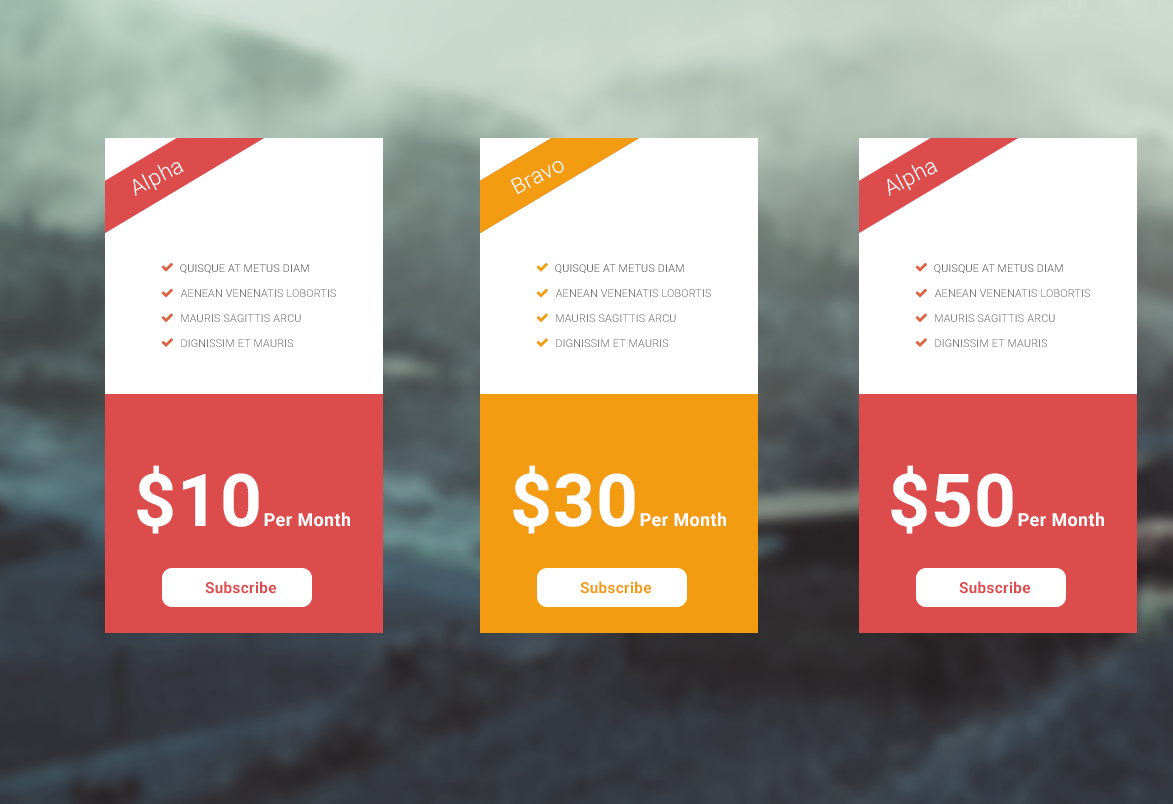
<style>
.page{position:relative;width:1173px;height:804px;background:#ffffff}
.page>*{position:absolute;margin:0}
.t1{font:22px "Roboto-Light";letter-spacing:0.02em;color:#ffffff}
.t2{font:10.8px "Roboto-Light";letter-spacing:0.02em;text-transform:uppercase}
.t3{font:18px "Roboto-Bold";letter-spacing:0.02em;color:#ffffff}
.t4{font:73px "Roboto-Bold";letter-spacing:0.02em;color:#ffffff}
.t5{font:15.3px "Roboto-Bold";letter-spacing:0.02em;color:#dd4c4c}
.t6{font:15.3px "Roboto-Bold";letter-spacing:0.02em;color:#f39c12}
</style>
<div class="page">
<p class="t1" style="left:510px;top:161px;width:54px;height:33px;rotate:-28deg">Bravo</p>
<p class="t1" style="left:133px;top:162px;width:51px;height:34px;rotate:-28deg">Alpha</p>
<p class="t1" style="left:887px;top:162px;width:51px;height:34px;rotate:-28deg">Alpha</p>
<p class="t2" style="left:180px;top:264px;width:129px;height:10px">Quisque at metus diam</p>
<p class="t2" style="left:555px;top:264px;width:129px;height:10px">Quisque at metus diam</p>
<p class="t2" style="left:934px;top:264px;width:129px;height:10px">Quisque at metus diam</p>
<p class="t2" style="left:181px;top:289px;width:155px;height:8px">Aenean venenatis lobortis</p>
<p class="t2" style="left:556px;top:289px;width:155px;height:8px">Aenean venenatis lobortis</p>
<p class="t2" style="left:935px;top:289px;width:155px;height:8px">Aenean venenatis lobortis</p>
<p class="t2" style="left:181px;top:314px;width:120px;height:8px">Mauris sagittis arcu</p>
<p class="t2" style="left:556px;top:314px;width:120px;height:8px">Mauris sagittis arcu</p>
<p class="t2" style="left:935px;top:314px;width:120px;height:8px">Mauris sagittis arcu</p>
<p class="t2" style="left:181px;top:339px;width:113px;height:8px">dignissim et mauris</p>
<p class="t2" style="left:556px;top:339px;width:113px;height:8px">dignissim et mauris</p>
<p class="t2" style="left:935px;top:339px;width:113px;height:8px">dignissim et mauris</p>
<p class="t3" style="left:137px;top:465px;width:213px;height:69px"><span class="t4">$10</span>Per Month</p>
<p class="t3" style="left:513px;top:465px;width:213px;height:69px"><span class="t4">$30</span>Per Month</p>
<p class="t3" style="left:891px;top:465px;width:213px;height:69px"><span class="t4">$50</span>Per Month</p>
<p class="t5" style="left:205px;top:581px;width:71px;height:13px">Subscribe</p>
<p class="t6" style="left:580px;top:581px;width:71px;height:13px">Subscribe</p>
<p class="t5" style="left:959px;top:581px;width:71px;height:13px">Subscribe</p>
</div>
